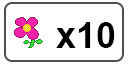
<style>
.page{position:relative;width:128px;height:64px;background:#ffffff}
.page>*{position:absolute;margin:0}
.t1{font:36px "Arial-BoldMT";letter-spacing:-0.005em;color:#000000}
</style>
<div class="page">
<p class="t1" style="left:56px;top:22px;width:59px;height:26px">x10</p>
</div>
